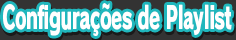
<style>
.page{position:relative;width:236px;height:40px;background:#20b7bd}
.page>*{position:absolute;margin:0}
.t1{font:30.7px "RodinPro-EB";letter-spacing:-0.024em;color:#ffffff;scale:0.58 1}
</style>
<div class="page">
<p class="t1" style="left:3px;top:3px;width:229px;height:33px">Configurações de Playlist</p>
</div>
